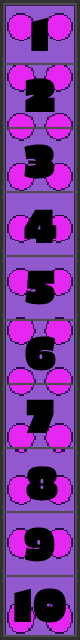
<style>
.page{position:relative;width:80px;height:640px;background:#9258ce}
.page>*{position:absolute;margin:0}
.t1{font:48px "EricaOne-Regular";color:#000000}
</style>
<div class="page">
<p class="t1" style="left:31px;top:17px;width:17px;height:34px">1</p>
<p class="t1" style="left:25px;top:78px;width:30px;height:34px">2</p>
<p class="t1" style="left:24px;top:144px;width:31px;height:35px">3</p>
<p class="t1" style="left:24px;top:209px;width:33px;height:34px">4</p>
<p class="t1" style="left:25px;top:270px;width:30px;height:35px">5</p>
<p class="t1" style="left:25px;top:336px;width:31px;height:35px">6</p>
<p class="t1" style="left:26px;top:399px;width:28px;height:34px">7</p>
<p class="t1" style="left:26px;top:466px;width:32px;height:35px">8</p>
<p class="t1" style="left:24px;top:527px;width:31px;height:35px">9</p>
<p class="t1" style="left:14px;top:588px;width:52px;height:35px">10</p>
</div>
